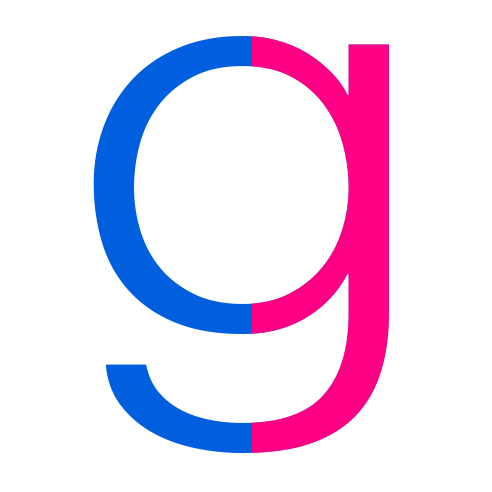
<style>
.page{position:relative;width:492px;height:492px;background:#ffffff}
.page>*{position:absolute;margin:0}
.t1{font:567px "HelveticaNeue-Light";scale:1.13 1}
</style>
<div class="page">
<p class="t1" style="left:93px;top:36px;width:296px;height:417px">g</p>
<p class="t1" style="left:93px;top:36px;width:296px;height:417px">g</p>
</div>
